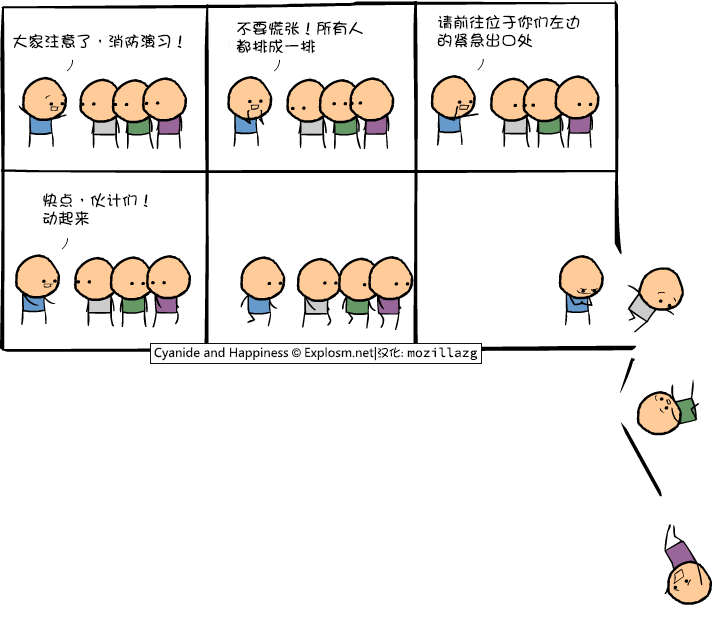
<style>
.page{position:relative;width:720px;height:625px;background:#ffffff}
.page>*{position:absolute;margin:0}
.t1{font:16px/18px "DFGirl";color:#000000}
.t2{font:16px "DFGirl";color:#000000}
</style>
<div class="page">
<p class="t1" style="left:437px;top:15px;width:143px;height:33px">请前往位于你们左边<br>的紧急出口处</p>
<p class="t1" style="left:236px;top:21px;width:127px;height:33px">不要慌张！所有人<br>都排成一排</p>
<p class="t2" style="left:13px;top:34px;width:169px;height:15px">大家注意了，消防演习！</p>
<p class="t1" style="left:42px;top:193px;width:106px;height:33px">快点，伙计们！<br>动起来</p>
</div>
